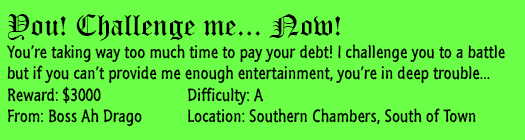
<style>
.page{position:relative;width:525px;height:140px;background:#6cff47}
.page>*{position:absolute;margin:0}
.t1{font:18px "SegoeMarker";color:#000000}
.t2{font:30px "OldEnglishTextMT";color:#000000}
</style>
<div class="page">
<p class="t1" style="left:7px;top:14px;width:498px;height:113px"><span class="t2">You! Challenge me... Now!<br></span>You’re taking way too much time to pay your debt! I challenge you to a battle<br>but if you can’t provide me enough entertainment, you’re in deep trouble...<br>Reward: $3000   Difficulty: A<br>From: Boss Ah Drago  Location: Southern Chambers, South of Town</p>
</div>
